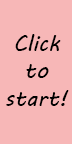
<style>
.page{position:relative;width:72px;height:144px;background:#f7b7b7}
.page>*{position:absolute;margin:0}
.t1{font:23px "MVBoli";color:#000000}
</style>
<div class="page">
<p class="t1" style="left:6px;top:34px;width:63px;height:72px;text-align:center">Click to start!</p>
</div>
